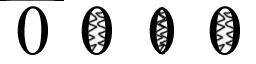
<style>
.page{position:relative;width:256px;height:64px;background:#ffffff}
.page>*{position:absolute;margin:0}
.t1{font:70.9px "TimesNewRomanPSMT";color:#000000}
</style>
<div class="page">
<p class="t1" style="left:17px;top:6px;width:31px;height:49px">0</p>
</div>
